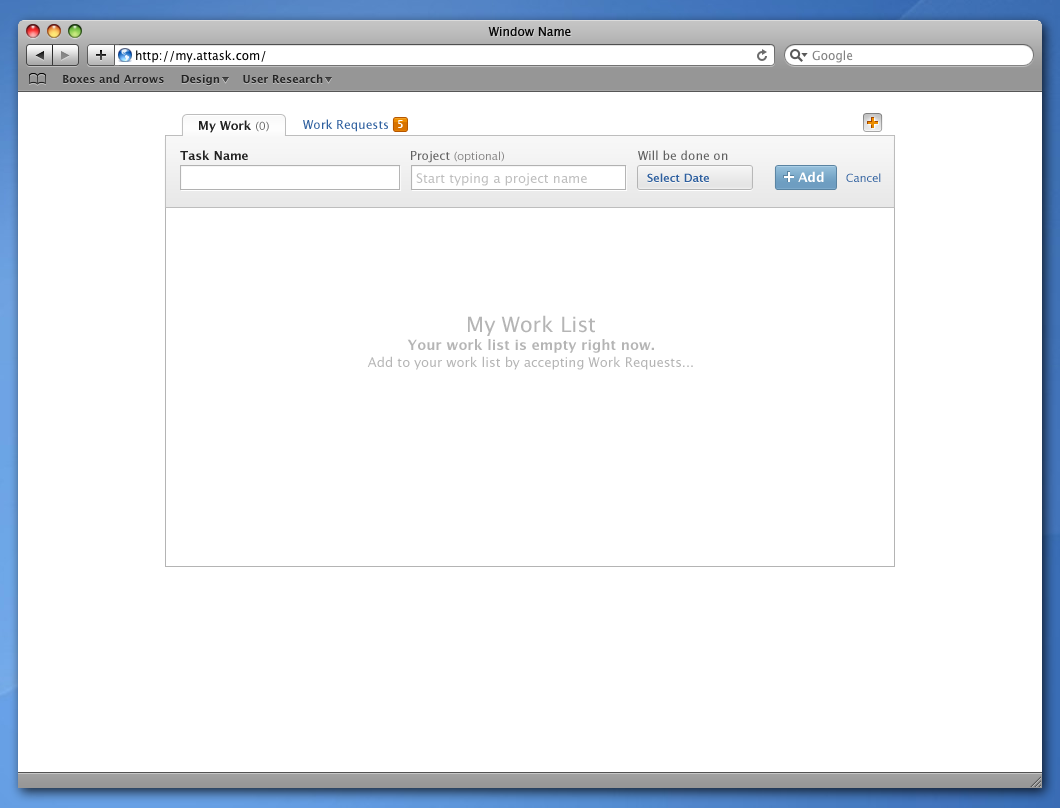
<style>
.page{position:relative;width:1060px;height:808px;background:#ffffff}
.page>*{position:absolute;margin:0}
.t1{font:12px "LucidaGrande";color:#080808}
.t2{font:12px "LucidaGrande-Bold";color:#222222}
.t3{font:11px "LucidaGrande";color:#686868}
.t4{font:12px "LucidaGrande";color:#2f609f}
.t5{font:10px "LucidaGrande-Bold";color:#ffffff}
.t6{font:12px "LucidaGrande";color:#606060}
.t7{font:11px "LucidaGrande";color:#878686}
.t8{font:13px "LucidaGrande";color:#bebebe}
.t9{font:11px "LucidaGrande-Bold";color:#2f609f}
.t10{font:13px "LucidaGrande-Bold";color:#ffffff}
.t11{font:11px "LucidaGrande";color:#2f609f}
.t12{font:13px/17px "LucidaGrande";color:#b5b5b5}
.t13{font:21px/18px "LucidaGrande";color:#b5b5b5}
.t14{font:14px/18px "LucidaGrande-Bold";color:#b5b5b5}
.t15{font:14px/17px "LucidaGrande-Bold";color:#b5b5b5}
</style>
<div class="page">
<p class="t1" style="left:488px;top:27px;width:83px;height:9px">Window Name</p>
<p class="t2" style="left:199px;top:120px;width:70px;height:13px">My Work <span class="t3">(0)</span></p>
<p class="t4" style="left:303px;top:119px;width:85px;height:13px">Work Requests</p>
<p class="t5" style="left:398px;top:120px;width:5px;height:8px">5</p>
<p class="t2" style="left:180px;top:150px;width:68px;height:10px">Task Name</p>
<p class="t6" style="left:638px;top:150px;width:90px;height:10px">Will be done on</p>
<p class="t7" style="left:411px;top:151px;width:93px;height:12px"><span class="t6">Project </span>(optional)</p>
<p class="t8" style="left:416px;top:173px;width:171px;height:13px">Start typing a project name</p>
<p class="t9" style="left:647px;top:173px;width:62px;height:9px">Select Date</p>
<p class="t10" style="left:798px;top:171px;width:26px;height:11px">Add</p>
<p class="t11" style="left:846px;top:173px;width:35px;height:9px">Cancel</p>
<p class="t12" style="left:367px;top:315px;width:326px;height:55px;text-align:center"><span class="t13">My Work List<br></span><span class="t14">Your work lis</span><span class="t15">t is empty right now.<br></span>Add to your work list by accepting Work Requests...</p>
</div>
